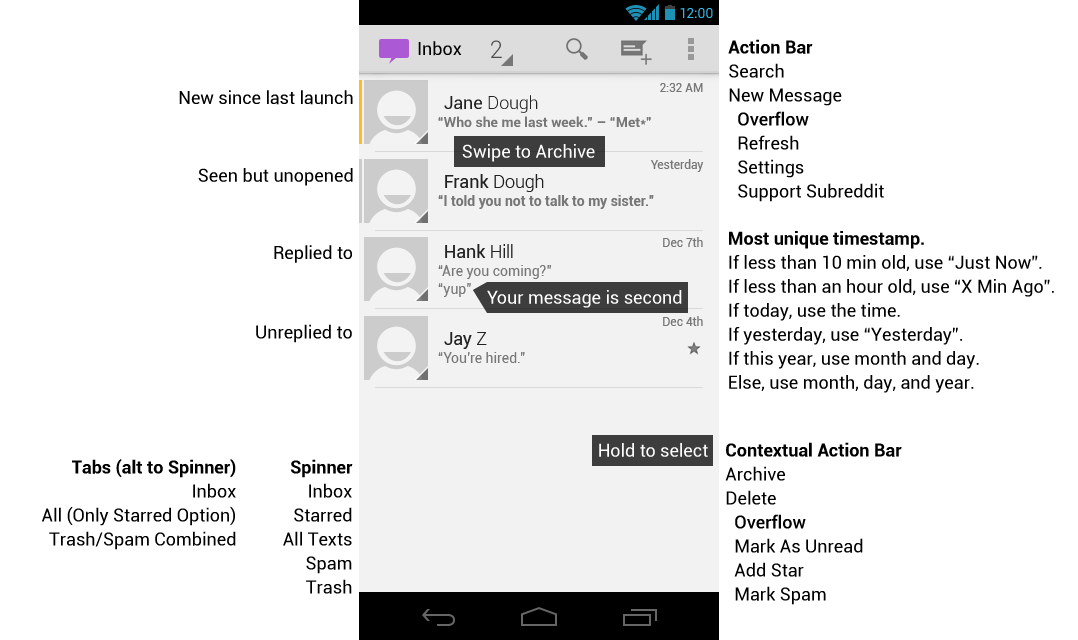
<style>
.page{position:relative;width:1078px;height:640px;background:#ffffff}
.page>*{position:absolute;margin:0}
.t1{font:18px/24px "Roboto-Regular";color:#000000}
.t2{font:18px/24px "Roboto-Bold";color:#000000}
.t3{font:18px/24px "Roboto-Medium";color:#000000}
.t4{font:18px "Roboto-Regular";color:#000000}
.t5{font:18px "Roboto-Regular";color:#ffffff}
</style>
<div class="page">
<p class="t1" style="left:728px;top:39px;width:156px;height:163px"><span class="t2">Action Bar<br></span>Search<br>New Message<br><span class="t3">  Overflow<br></span>  Refresh<br>  Settings<br>  Support Subreddit</p>
<p class="t4" style="left:179px;top:90px;width:174px;height:15px">New since last launch</p>
<p class="t5" style="left:462px;top:144px;width:133px;height:18px">Swipe to Archive</p>
<p class="t4" style="left:198px;top:168px;width:155px;height:18px">Seen but unopened</p>
<p class="t1" style="left:729px;top:231px;width:325px;height:162px"><span class="t2">Most unique timestamp.<br></span>If less than 10 min old, use “Just Now”.<br>If less than an hour old, use “X Min Ago”.<br>If today, use the time.<br>If yesterday, use “Yesterday”.<br>If this year, use month and day.<br>Else, use month, day, and year.</p>
<p class="t4" style="left:274px;top:245px;width:78px;height:18px">Replied to</p>
<p class="t5" style="left:487px;top:290px;width:195px;height:18px">Your message is second</p>
<p class="t4" style="left:256px;top:324px;width:96px;height:19px">Unreplied to</p>
<p class="t5" style="left:599px;top:443px;width:109px;height:14px">Hold to select</p>
<p class="t1" style="left:725px;top:442px;width:177px;height:163px"><span class="t2">Contextual Action Bar<br></span>Archive<br>Delete<br><span class="t3">  Overflow<br></span>  Mark As Unread<br>  Add Star<br>  Mark Spam</p>
<p class="t1" style="left:42px;top:459px;width:194px;height:91px;text-align:right"><span class="t2">Tabs (alt to Spinner)<br></span>Inbox<br>All (Only Starred Option)<br>Trash/Spam Combined</p>
<p class="t1" style="left:283px;top:459px;width:70px;height:135px;text-align:right"><span class="t2">Spinner<br></span>Inbox<br>Starred<br>All Texts<br>Spam<br>Trash</p>
</div>
